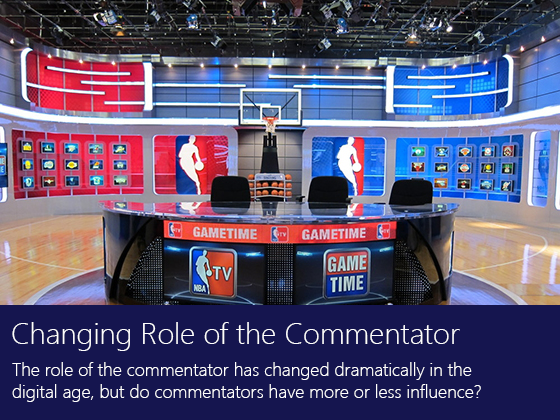
<style>
.page{position:relative;width:560px;height:420px;background:#15154f}
.page>*{position:absolute;margin:0}
.t1{font:30px "SegoeUI-Light";color:#ffffff}
.t2{font:18px "SegoeUI-Light";color:#ffffff}
</style>
<div class="page">
<p class="t1" style="left:12px;top:322px;width:448px;height:29px">Changing Role of the Commentator</p>
<p class="t2" style="left:12px;top:362px;width:469px;height:40px">The role of the commentator has changed dramatically in the <br>digital age, but do commentators have more or less influence?</p>
</div>
